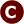
<style>
.page{position:relative;width:24px;height:24px;background:#660000}
.page>*{position:absolute;margin:0}
.t1{font:16.5px "Verdana-Bold";color:#ffffff}
</style>
<div class="page">
<p class="t1" style="left:5px;top:5px;width:11px;height:14px">C</p>
</div>
